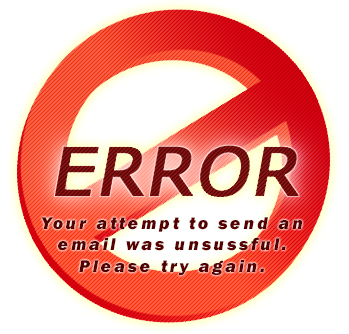
<style>
.page{position:relative;width:349px;height:334px;background:#ffffff}
.page>*{position:absolute;margin:0}
.t1{font:17.7px "FranklinGothic-HeavyItalic";letter-spacing:0.15em;color:#570000}
</style>
<div class="page">
<p class="t1" style="left:41px;top:217px;width:262px;height:59px;text-align:center">Your attempt to send an<br>email was unsussful.<br>Please try again.</p>
</div>
